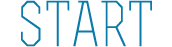
<style>
.page{position:relative;width:172px;height:47px;background:#ffffff}
.page>*{position:absolute;margin:0}
.t1{font:60px "RexLight";color:#0a7aaa;font-weight:bold}
</style>
<div class="page">
<p class="t1" style="left:21px;top:0px;width:131px;height:47px">START</p>
</div>
